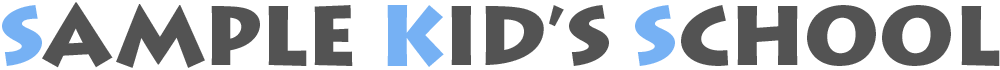
<style>
.page{position:relative;width:1000px;height:70px;background:#ffffff}
.page>*{position:absolute;margin:0}
.t1{font:83.8px "LithosPro-Black";color:#535353}
.t2{font:83.8px "LithosPro-Black";color:#76b1f4}
</style>
<div class="page">
<p class="t1" style="left:2px;top:2px;width:998px;height:66px"><span class="t2">S</span>AMPLE <span class="t2">K</span>ID’S <span class="t2">S</span>CHOOL</p>
</div>
